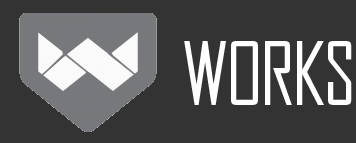
<style>
.page{position:relative;width:356px;height:143px;background:#333333}
.page>*{position:absolute;margin:0}
.t1{font:80px "OPTIAgency-Gothic";letter-spacing:0.01em;color:#ffffff}
</style>
<div class="page">
<p class="t1" style="left:184px;top:41px;width:168px;height:64px">WORKS</p>
</div>
